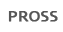
<style>
.page{position:relative;width:63px;height:32px;background:#ffffff}
.page>*{position:absolute;margin:0}
.t1{font:14px "TrebuchetMS";letter-spacing:0.02em;color:#575757;font-weight:bold;scale:1.2 1}
</style>
<div class="page">
<p class="t1" style="left:8px;top:11px;width:50px;height:11px">PROSS</p>
</div>
